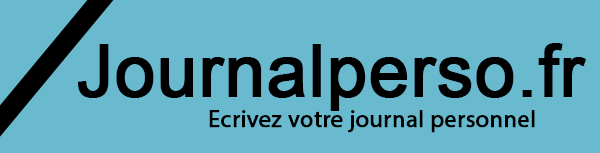
<style>
.page{position:relative;width:600px;height:153px;background:#69bace}
.page>*{position:absolute;margin:0}
.t1{font:72px "ArialMT";color:#000000;font-weight:bold}
.t2{font:24px "MyriadPro-Regular";color:#000000;font-weight:bold}
</style>
<div class="page">
<p class="t1" style="left:78px;top:43px;width:508px;height:68px">Journalperso.fr</p>
<p class="t2" style="left:209px;top:110px;width:326px;height:23px">Ecrivez votre journal personnel</p>
</div>
